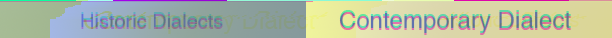
<style>
.page{position:relative;width:612px;height:38px}
.page>*{position:absolute;margin:0}
.t1{font:20px "Helvetica"}
.t2{font:24px "Helvetica"}
</style>
<div class="page">
<p class="t1" style="left:81px;top:12px;width:142px;height:15px">Historic Dialects</p>
<p class="t2" style="left:339px;top:10px;width:232px;height:23px">Contemporary Dialect</p>
</div>
